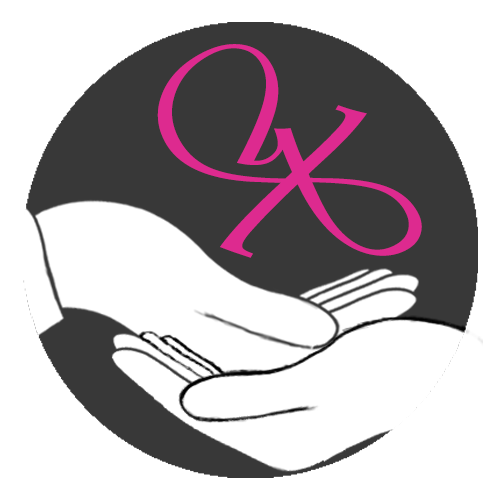
<style>
.page{position:relative;width:500px;height:500px;background:#ffffff}
.page>*{position:absolute;margin:0}
.t1{font:273.8px "Vivaldii";color:#dd2a8f;scale:0.78 1}
</style>
<div class="page">
<p class="t1" style="left:157px;top:44px;width:265px;height:214px;rotate:62deg">X</p>
</div>
